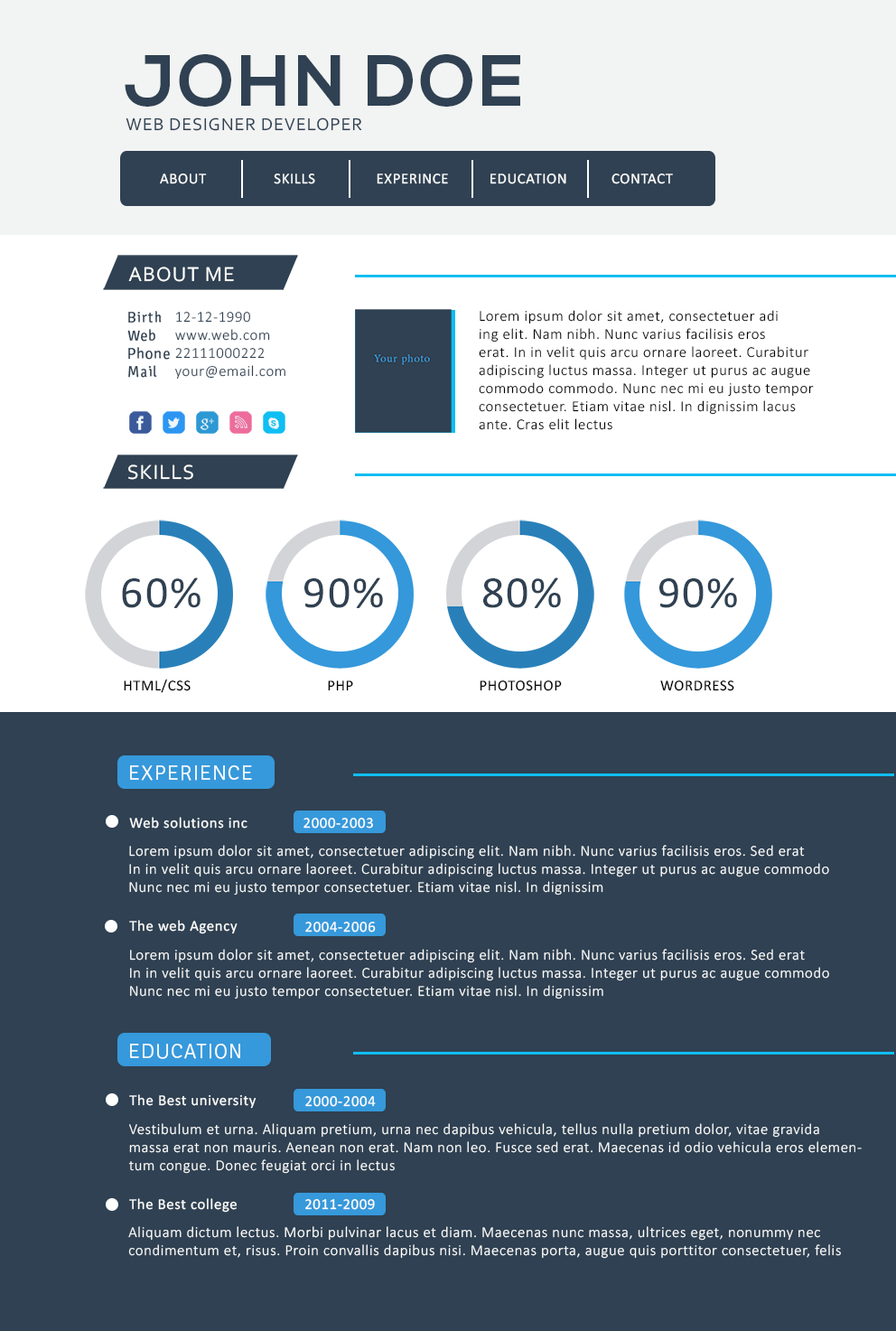
<style>
.page{position:relative;width:896px;height:1331px;background:#2f4152}
.page>*{position:absolute;margin:0}
.t1{font:72.3px "NexaBold";letter-spacing:0.04em;color:#2f4152}
.t2{font:18.1px "Corbel";letter-spacing:0.04em;color:#2f4152}
.t3{font:15.1px "Calibri";letter-spacing:0.04em;color:#ffffff}
.t4{font:21.1px "Corbel";letter-spacing:0.04em;color:#ffffff}
.t5{font:15.1px "Signika-Regular";letter-spacing:0.04em;color:#2f4152}
.t6{font:15.1px "Calibri-Light";letter-spacing:0.04em;color:#2f4152}
.t7{font:15.1px "Calibri-Light";letter-spacing:0.04em;color:#010000}
.t8{font:45.2px "Calibri";letter-spacing:0.04em;color:#2f4152}
.t9{font:15.1px "Calibri";letter-spacing:0.04em;color:#000000}
.t10{font:21.1px "Signika-Light";letter-spacing:0.04em;color:#ffffff}
.t11{font:15.1px "Calibri-Light";letter-spacing:0.04em;color:#ffffff}
</style>
<div class="page">
<p class="t1" style="left:125px;top:54px;width:395px;height:53px">JOHN DOE</p>
<p class="t2" style="left:126px;top:117px;width:236px;height:14px">WEB DESIGNER DEVELOPER</p>
<p class="t3" style="left:160px;top:173px;width:47px;height:11px">ABOUT</p>
<p class="t3" style="left:274px;top:173px;width:41px;height:11px">SKILLS</p>
<p class="t3" style="left:377px;top:173px;width:71px;height:11px">EXPERINCE</p>
<p class="t3" style="left:491px;top:173px;width:75px;height:11px">EDUCATION</p>
<p class="t3" style="left:612px;top:173px;width:61px;height:11px">CONTACT</p>
<p class="t4" style="left:128px;top:266px;width:106px;height:16px">ABOUT ME</p>
<p class="t5" style="left:127px;top:311px;width:43px;height:67px;text-align:right">Birth<br>Web<br>Phone<br>Mail</p>
<p class="t6" style="left:175px;top:312px;width:110px;height:67px;text-align:right">12-12-1990<br>www.web.com<br>22111000222<br>your@email.com</p>
<p class="t7" style="left:479px;top:310px;width:335px;height:120px;text-align:right">Lorem ipsum dolor sit amet, consectetuer adi<br>ing elit. Nam nibh. Nunc varius facilisis eros<br> erat. In in velit quis arcu ornare laoreet. Curabitur adipiscing luctus massa. Integer ut purus ac augue commodo commodo. Nunc nec mi eu justo tempor consectetuer. Etiam vitae nisl. In dignissim lacus  ante. Cras elit lectus</p>
<p class="t4" style="left:128px;top:464px;width:65px;height:16px">SKILLS</p>
<p class="t8" style="left:122px;top:577px;width:79px;height:31px">60%</p>
<p class="t8" style="left:304px;top:577px;width:79px;height:31px">90%</p>
<p class="t8" style="left:483px;top:577px;width:78px;height:31px">80%</p>
<p class="t8" style="left:659px;top:577px;width:78px;height:31px">90%</p>
<p class="t9" style="left:124px;top:678px;width:67px;height:15px">HTML/CSS</p>
<p class="t9" style="left:328px;top:680px;width:25px;height:11px">PHP</p>
<p class="t9" style="left:480px;top:680px;width:82px;height:11px">PHOTOSHOP</p>
<p class="t9" style="left:660px;top:680px;width:74px;height:11px">WORDRESS</p>
<p class="t10" style="left:130px;top:765px;width:122px;height:16px">EXPERIENCE</p>
<p class="t3" style="left:129px;top:817px;width:119px;height:11px">Web solutions inc</p>
<p class="t3" style="left:304px;top:818px;width:69px;height:10px">2000-2003</p>
<p class="t11" style="left:129px;top:845px;width:700px;height:50px;text-align:right">Lorem ipsum dolor sit amet, consectetuer adipiscing elit. Nam nibh. Nunc varius facilisis eros. Sed erat<br> In in velit quis arcu ornare laoreet. Curabitur adipiscing luctus massa. Integer ut purus ac augue commodo <br> Nunc nec mi eu justo tempor consectetuer. Etiam vitae nisl. In dignissim</p>
<p class="t3" style="left:129px;top:920px;width:109px;height:14px">The web Agency</p>
<p class="t3" style="left:305px;top:921px;width:71px;height:11px">2004-2006</p>
<p class="t11" style="left:130px;top:949px;width:699px;height:50px;text-align:right">Lorem ipsum dolor sit amet, consectetuer adipiscing elit. Nam nibh. Nunc varius facilisis eros. Sed erat<br>In in velit quis arcu ornare laoreet. Curabitur adipiscing luctus massa. Integer ut purus ac augue commodo <br> Nunc nec mi eu justo tempor consectetuer. Etiam vitae nisl. In dignissim</p>
<p class="t10" style="left:130px;top:1043px;width:110px;height:16px">EDUCATION</p>
<p class="t3" style="left:129px;top:1094px;width:128px;height:14px">The Best university</p>
<p class="t3" style="left:305px;top:1096px;width:71px;height:11px">2000-2004</p>
<p class="t11" style="left:128px;top:1123px;width:734px;height:50px;text-align:right">Vestibulum et urna. Aliquam pretium, urna nec dapibus vehicula, tellus nulla pretium dolor, vitae gravida massa erat non mauris. Aenean non erat. Nam non leo. Fusce sed erat. Maecenas id odio vehicula eros elementum congue. Donec feugiat orci in lectus</p>
<p class="t3" style="left:129px;top:1198px;width:108px;height:14px">The Best college</p>
<p class="t3" style="left:305px;top:1199px;width:70px;height:11px">2011-2009</p>
<p class="t11" style="left:128px;top:1226px;width:713px;height:32px;text-align:right">Aliquam dictum lectus. Morbi pulvinar lacus et diam. Maecenas nunc massa, ultrices eget, nonummy nec<br> condimentum et, risus. Proin convallis dapibus nisi. Maecenas porta, augue quis porttitor consectetuer, felis</p>
</div>
